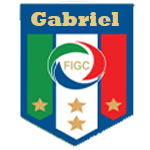
<style>
.page{position:relative;width:150px;height:150px;background:#ffffff}
.page>*{position:absolute;margin:0}
.t1{font:20px "Rockwell-ExtraBold";color:#e4cb7e}
</style>
<div class="page">
<p class="t1" style="left:31px;top:12px;width:88px;height:14px">Gabriel</p>
</div>
